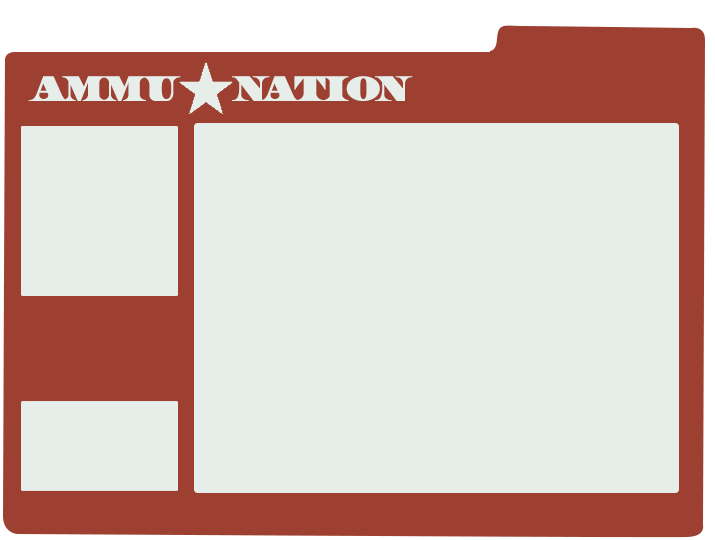
<style>
.page{position:relative;width:715px;height:540px;background:#e7ede9}
.page>*{position:absolute;margin:0}
.t1{font:33px "UnitedStates";letter-spacing:0.01em;color:#e7ede9}
</style>
<div class="page">
<p class="t1" style="left:28px;top:76px;width:153px;height:25px">AMMU</p>
<p class="t1" style="left:232px;top:76px;width:181px;height:25px">NATION</p>
</div>
